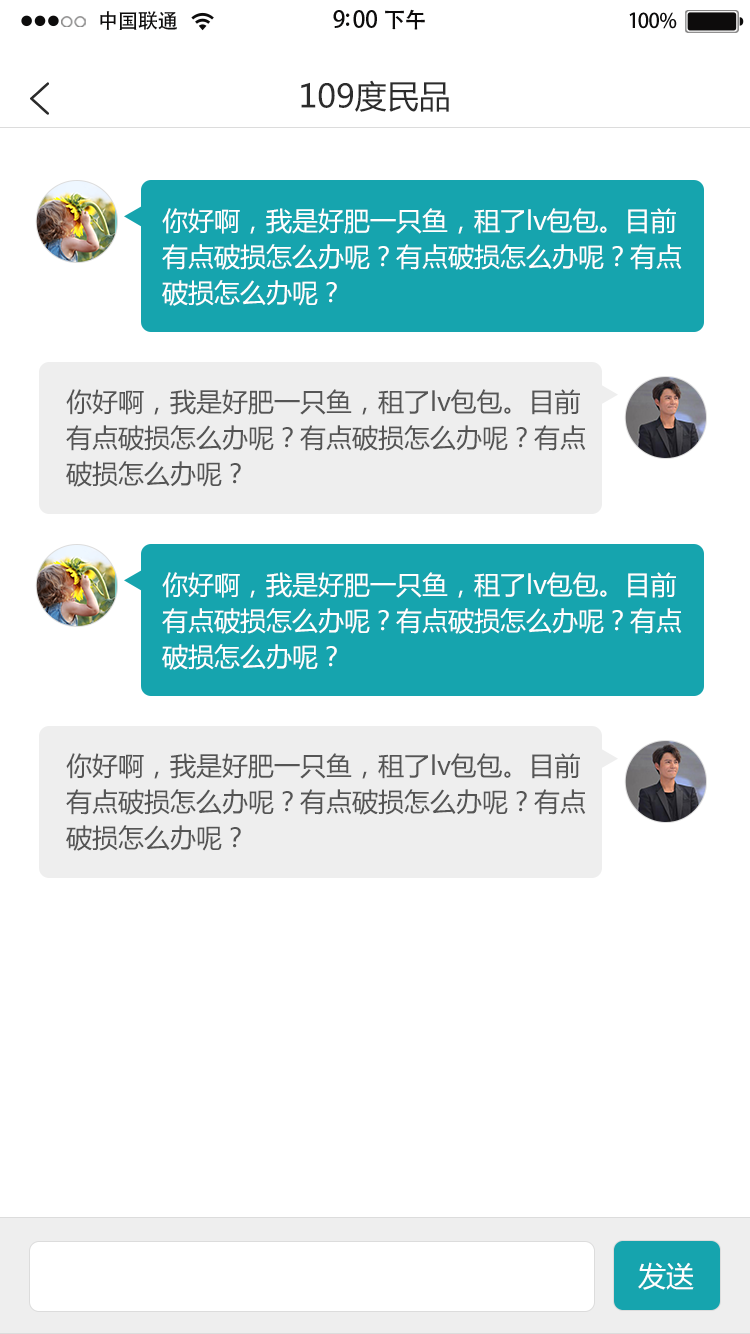
<style>
.page{position:relative;width:750px;height:1334px;background:#ffffff}
.page>*{position:absolute;margin:0}
.t1{font:20.4px "AdobeHeitiStd-Regular";letter-spacing:-0.02em;color:#000000}
.t2{font:23px "AdobeHeitiStd-Regular";letter-spacing:-0.02em;color:#000000}
.t3{font:22px "AdobeHeitiStd-Regular";letter-spacing:-0.02em;color:#000000}
.t4{font:20.4px "AdobeHeitiStd-Regular";letter-spacing:-0.02em;color:#010101}
.t5{font:32px "MicrosoftYaHei";color:#2c2c2c}
.t6{font:26px/18px "MicrosoftYaHei";color:#ffffff}
.t7{font:26px/18px "MicrosoftYaHei";color:#555555}
.t8{font:28px "MicrosoftYaHei";color:#ffffff}
</style>
<div class="page">
<p class="t1" style="left:100px;top:11px;width:77px;height:19px">中国联通</p>
<p class="t2" style="left:333px;top:9px;width:92px;height:21px">9:00 <span class="t3">下午</span></p>
<p class="t4" style="left:629px;top:12px;width:48px;height:17px">100%</p>
<p class="t5" style="left:301px;top:80px;width:148px;height:32px">109度民品</p>
<p class="t6" style="left:162px;top:208px;width:520px;height:98px">你好啊，我是好肥一只鱼，租了lv包包。目前<br><br>有点破损怎么办呢？有点破损怎么办呢？有点<br><br>破损怎么办呢？</p>
<p class="t7" style="left:66px;top:389px;width:520px;height:98px">你好啊，我是好肥一只鱼，租了lv包包。目前<br><br>有点破损怎么办呢？有点破损怎么办呢？有点<br><br>破损怎么办呢？</p>
<p class="t6" style="left:162px;top:572px;width:520px;height:98px">你好啊，我是好肥一只鱼，租了lv包包。目前<br><br>有点破损怎么办呢？有点破损怎么办呢？有点<br><br>破损怎么办呢？</p>
<p class="t7" style="left:66px;top:753px;width:520px;height:98px">你好啊，我是好肥一只鱼，租了lv包包。目前<br><br>有点破损怎么办呢？有点破损怎么办呢？有点<br><br>破损怎么办呢？</p>
<p class="t8" style="left:638px;top:1262px;width:56px;height:28px">发送</p>
</div>
